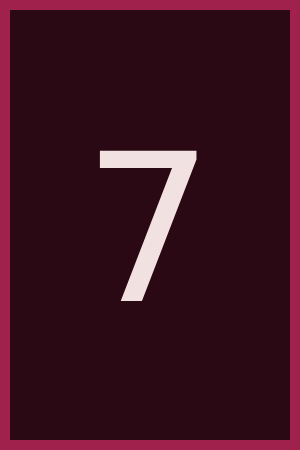
<style>
.page{position:relative;width:300px;height:450px;background:#2a0914}
.page>*{position:absolute;margin:0}
.t1{font:206px "DejaVuSans";color:#f2e1e1}
</style>
<div class="page">
<p class="t1" style="left:99px;top:150px;width:98px;height:151px">7</p>
</div>
